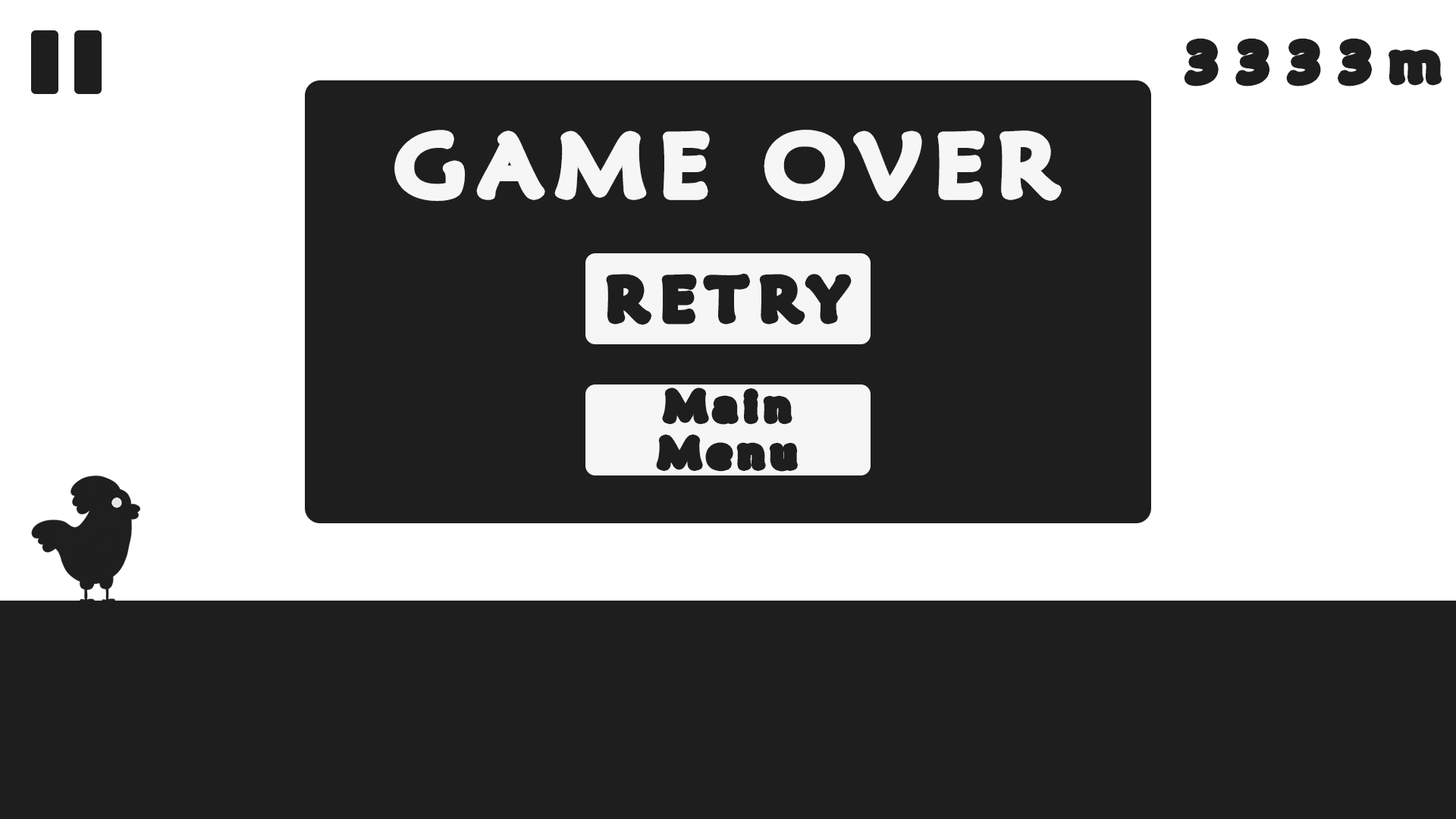
<style>
.page{position:relative;width:1456px;height:819px;background:#1e1e1e}
.page>*{position:absolute;margin:0}
.t1{font:52.6px "MaiandraGD-Regular";letter-spacing:0.28em;color:#1e1e1e;font-weight:bold;scale:1.11 1}
.t2{font:83.4px "MaiandraGD-Regular";letter-spacing:0.14em;color:#f6f6f6;font-weight:bold;scale:1.11 1}
.t3{font:56.9px "MaiandraGD-Regular";letter-spacing:0.2em;color:#1e1e1e;font-weight:bold;scale:1.11 1}
.t4{font:37.9px/46.8px "MaiandraGD-Regular";letter-spacing:0.2em;color:#1e1e1e;font-weight:bold;scale:1.11 1}
</style>
<div class="page">
<p class="t1" style="left:1188px;top:42px;width:250px;height:40px">3333m</p>
<p class="t2" style="left:399px;top:134px;width:658px;height:63px">GAME OVER</p>
<p class="t3" style="left:610px;top:278px;width:237px;height:43px">RETRY</p>
<p class="t4" style="left:660px;top:392px;width:133px;height:75px;text-align:center">Main<br>Menu</p>
</div>
